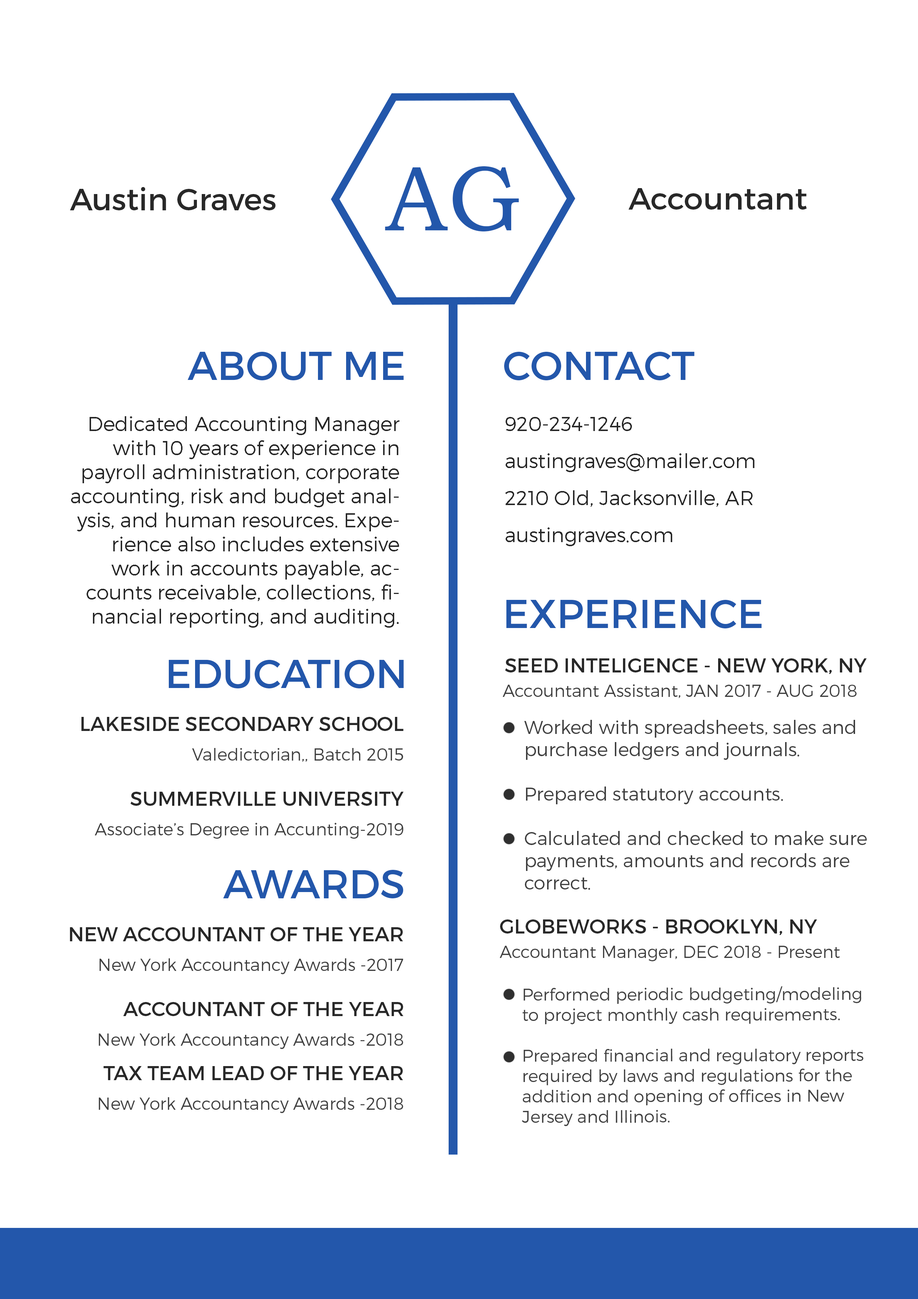
<style>
.page{position:relative;width:918px;height:1299px;background:#ffffff}
.page>*{position:absolute;margin:0}
.t1{font:92.6px "BookmanOldStyle";color:#2357ab}
.t2{font:30.9px "Montserrat-Regular";color:#282828}
.t3{font:40.1px "Montserrat-Regular";color:#2357ab}
.t4{font:20.1px "Montserrat-Light";color:#282828}
.t5{font:20.1px/37px "Montserrat-Light";color:#282828}
.t6{font:20.1px "Montserrat-Regular";color:#282828}
.t7{font:17px "Montserrat-Light";color:#404040}
.t8{font:18.5px "Montserrat-Light";color:#404040}
</style>
<div class="page">
<p class="t1" style="left:385px;top:166px;width:134px;height:65px">AG</p>
<p class="t2" style="left:70px;top:187px;width:206px;height:23px">Austin Graves</p>
<p class="t2" style="left:629px;top:188px;width:178px;height:22px">Accountant</p>
<p class="t3" style="left:188px;top:351px;width:216px;height:29px">ABOUT ME</p>
<p class="t3" style="left:504px;top:351px;width:191px;height:30px">CONTACT</p>
<p class="t4" style="left:71px;top:416px;width:328px;height:212px;text-align:right">Dedicated Accounting Manager with 10 years of experience in payroll administration, corporate accounting, risk and budget analysis, and human resources. Experience also includes extensive work in accounts payable, accounts receivable, collections, financial reporting, and auditing.</p>
<p class="t5" style="left:505px;top:417px;width:250px;height:129px">920-234-1246<br>austingraves@mailer.com<br>2210 Old, Jacksonville, AR<br>austingraves.com</p>
<p class="t3" style="left:506px;top:599px;width:256px;height:30px">EXPERIENCE</p>
<p class="t3" style="left:169px;top:659px;width:235px;height:30px">EDUCATION</p>
<p class="t6" style="left:505px;top:658px;width:362px;height:16px">SEED INTELIGENCE - NEW YORK, NY</p>
<p class="t7" style="left:503px;top:684px;width:354px;height:14px">Accountant Assistant, JAN 2017 - AUG 2018</p>
<p class="t6" style="left:81px;top:717px;width:323px;height:14px">LAKESIDE SECONDARY SCHOOL</p>
<p class="t8" style="left:524px;top:720px;width:343px;height:170px">Worked with spreadsheets, sales and purchase ledgers and journals.<br><br>Prepared statutory accounts.<br><br>Calculated and checked to make sure payments, amounts and records are correct.</p>
<p class="t7" style="left:192px;top:748px;width:211px;height:14px">Valedictorian,, Batch 2015</p>
<p class="t6" style="left:130px;top:792px;width:274px;height:14px">SUMMERVILLE UNIVERSITY</p>
<p class="t7" style="left:95px;top:823px;width:309px;height:16px">Associate’s Degree in Accunting-2019</p>
<p class="t3" style="left:223px;top:870px;width:181px;height:28px">AWARDS</p>
<p class="t6" style="left:70px;top:927px;width:333px;height:14px">NEW ACCOUNTANT OF THE YEAR</p>
<p class="t6" style="left:500px;top:919px;width:317px;height:16px">GLOBEWORKS - BROOKLYN, NY</p>
<p class="t7" style="left:500px;top:946px;width:340px;height:15px">Accountant Manager, DEC 2018 - Present</p>
<p class="t7" style="left:100px;top:958px;width:303px;height:16px">New York Accountancy Awards -2017</p>
<p class="t7" style="left:522px;top:986px;width:342px;height:140px">Performed periodic budgeting/modeling to project monthly cash requirements.<br><br>Prepared financial and regulatory reports required by laws and regulations for the addition and opening of offices in New Jersey and Illinois.<br><br>Prepared monthly and annual expense forecasts, including any necessary recommended action required to manage costs to achieve budget.</p>
<p class="t6" style="left:123px;top:1002px;width:281px;height:14px">ACCOUNTANT OF THE YEAR</p>
<p class="t7" style="left:99px;top:1033px;width:304px;height:16px">New York Accountancy Awards -2018</p>
<p class="t6" style="left:103px;top:1066px;width:300px;height:14px">TAX TEAM LEAD OF THE YEAR</p>
<p class="t7" style="left:99px;top:1097px;width:304px;height:16px">New York Accountancy Awards -2018</p>
</div>
